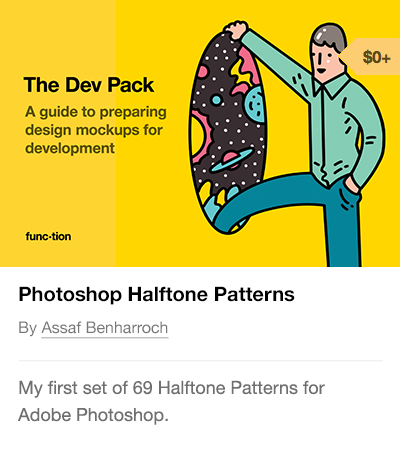
<style>
.page{position:relative;width:400px;height:462px;background:#ffffff}
.page>*{position:absolute;margin:0}
.t1{font:20.1px "HelveticaNeue-Bold";color:#000000}
.t2{font:16.1px "HelveticaNeue";color:#777777;text-decoration:underline}
.t3{font:16.1px "HelveticaNeue";color:#777777}
.t4{font:18.1px/27.1px "HelveticaNeue";color:#6f6f6f}
</style>
<div class="page">
<p class="t1" style="left:19px;top:286px;width:276px;height:19px">Photoshop Halftone Patterns</p>
<p class="t2" style="left:19px;top:321px;width:150px;height:18px"><span class="t3">By </span>Assaf Benharroch</p>
<p class="t4" style="left:18px;top:380px;width:307px;height:45px">My first set of 69 Halftone Patterns for <br>Adobe Photoshop.</p>
</div>
